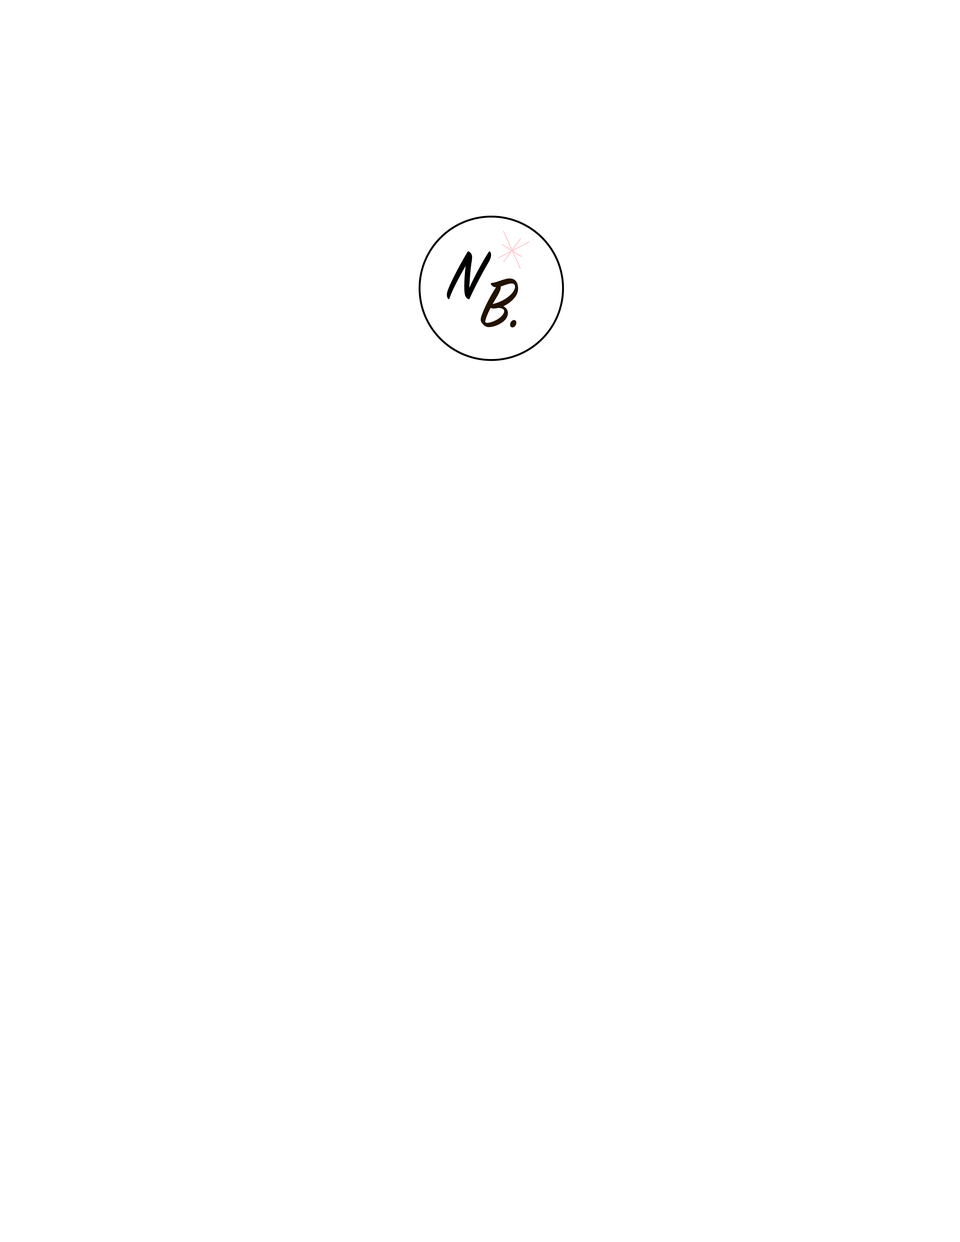
<style>
.page{position:relative;width:960px;height:1242px;background:#ffffff}
.page>*{position:absolute;margin:0}
.t1{font:75.3px "SignPainter-HouseScript";color:#000000}
.t2{font:25.1px "MyriadPro-Regular";color:#757575}
.t3{font:75.3px "SignPainter-HouseScript";color:#221200}
</style>
<div class="page">
<p class="t1" style="left:447px;top:251px;width:44px;height:49px"><span class="t2"><br></span>N</p>
<p class="t3" style="left:480px;top:278px;width:38px;height:49px">B.</p>
</div>
